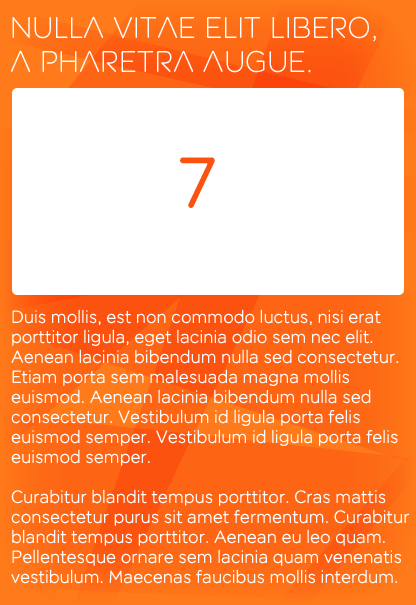
<style>
.page{position:relative;width:416px;height:605px;background:#ffffff}
.page>*{position:absolute;margin:0}
.t1{font:30px/34px "easyJetRoundedHeadline";color:#ffffff}
.t2{font:72px "easyJetRoundedBook";color:#fc520f}
.t3{font:18px/20px "easyJetRoundedBook";color:#ffffff}
</style>
<div class="page">
<p class="t1" style="left:11px;top:16px;width:365px;height:57px">Nulla vitae elit libero, <br>a pharetra augue.</p>
<p class="t2" style="left:180px;top:157px;width:35px;height:51px">7</p>
<p class="t3" style="left:11px;top:309px;width:398px;height:275px">Duis mollis, est non commodo luctus, nisi erat <br>porttitor ligula, eget lacinia odio sem nec elit. <br>Aenean lacinia bibendum nulla sed consectetur. <br>Etiam porta sem malesuada magna mollis <br>euismod. Aenean lacinia bibendum nulla sed <br>consectetur. Vestibulum id ligula porta felis <br>euismod semper. Vestibulum id ligula porta felis <br>euismod semper.<br><br>Curabitur blandit tempus porttitor. Cras mattis <br>consectetur purus sit amet fermentum. Curabitur <br>blandit tempus porttitor. Aenean eu leo quam. <br>Pellentesque ornare sem lacinia quam venenatis <br>vestibulum. Maecenas faucibus mollis interdum.</p>
</div>
